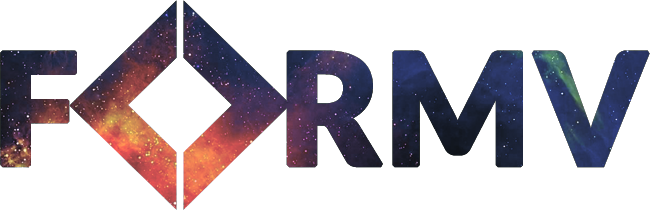
<style>
.page{position:relative;width:650px;height:210px;background:#ffffff}
.page>*{position:absolute;margin:0}
.t1{font:154.2px "Lato-Black";font-weight:bold}
</style>
<div class="page">
<p class="t1" style="left:0px;top:50px;width:650px;height:118px">F     RMV</p>
</div>
